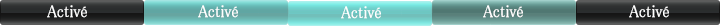
<style>
.page{position:relative;width:720px;height:26px}
.page>*{position:absolute;margin:0}
.t1{font:17.1px "MS-PMincho";color:#ffffff;font-weight:bold;scale:0.84 1}
</style>
<div class="page">
<p class="t1" style="left:47px;top:5px;width:40px;height:13px">Activé</p>
<p class="t1" style="left:198px;top:5px;width:40px;height:13px">Activé</p>
<p class="t1" style="left:341px;top:6px;width:40px;height:13px">Activé</p>
<p class="t1" style="left:483px;top:5px;width:40px;height:13px">Activé</p>
<p class="t1" style="left:629px;top:5px;width:40px;height:13px">Activé</p>
</div>
